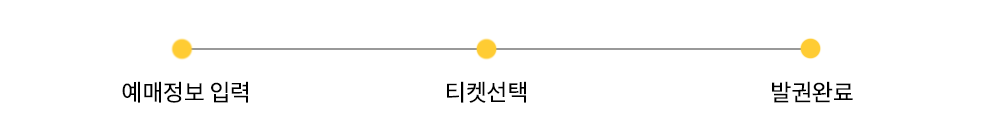
<style>
.page{position:relative;width:1000px;height:140px;background:#ffffff}
.page>*{position:absolute;margin:0}
.t1{font:24px "TossProductSansTTF-Medium";color:#000000}
</style>
<div class="page">
<p class="t1" style="left:122px;top:81px;width:126px;height:22px">예매정보 입력</p>
<p class="t1" style="left:447px;top:81px;width:79px;height:22px">티켓선택</p>
<p class="t1" style="left:772px;top:81px;width:81px;height:22px">발권완료</p>
</div>
